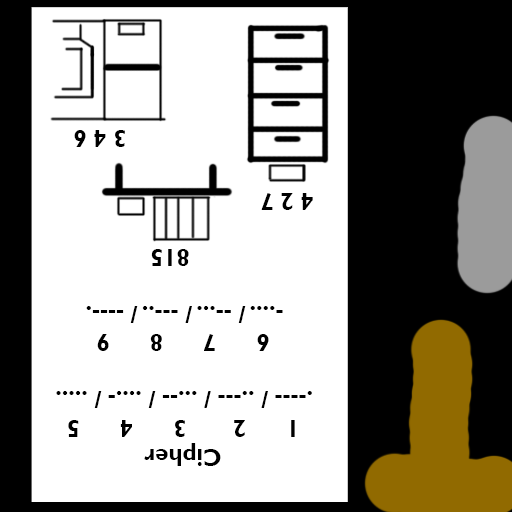
<style>
.page{position:relative;width:512px;height:512px;background:#ffffff}
.page>*{position:absolute;margin:0}
.t1{font:24px "GillSansMT-Bold";color:#000000}
</style>
<div class="page">
<p class="t1" style="left:74px;top:130px;width:51px;height:17px;rotate:180deg">3 4 6</p>
<p class="t1" style="left:261px;top:193px;width:52px;height:17px;rotate:180deg">4 2 7</p>
<p class="t1" style="left:151px;top:249px;width:38px;height:17px;rotate:180deg">815</p>
<p class="t1" style="left:86px;top:306px;width:197px;height:17px;rotate:180deg">-.... / --... / ---.. / ----.</p>
<p class="t1" style="left:68px;top:334px;width:227px;height:132px;text-align:center;rotate:180deg">Cipher<br> 1      2       3      4      5 <br><br><br>6      7      8      9</p>
<p class="t1" style="left:56px;top:391px;width:256px;height:17px;rotate:180deg">.---- / ..--- / ...-- / ....- / .....</p>
</div>
